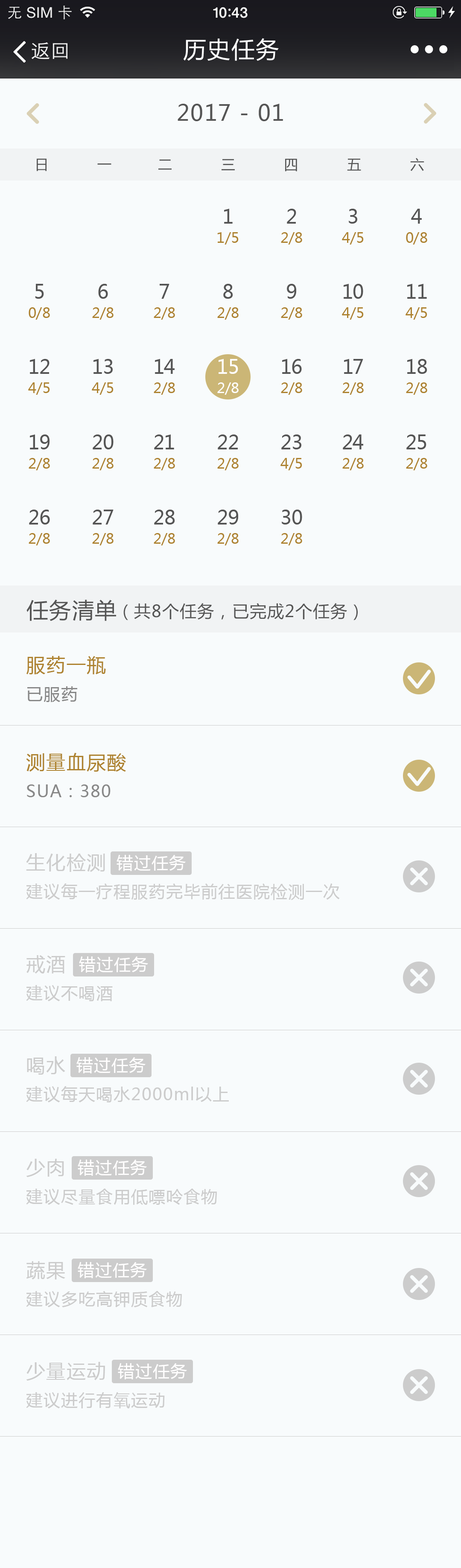
<style>
.page{position:relative;width:461px;height:1568px;background:#f8fbfc}
.page>*{position:absolute;margin:0}
.t1{font:21.8px "MicrosoftYaHei";letter-spacing:0.05em;color:#555555}
.t2{font:14.1px "MicrosoftYaHei";letter-spacing:3.48em;color:#555555}
.t3{font:14.1px/19.2px "MicrosoftYaHei";letter-spacing:0.025em;color:#ae8330}
.t4{font:19.2px/19.2px "MicrosoftYaHei";letter-spacing:0.025em;color:#555555}
.t5{font:14.1px/19.2px "MicrosoftYaHei";letter-spacing:0.025em;color:#fffefe}
.t6{font:19.2px/19.2px "MicrosoftYaHei";letter-spacing:0.025em;color:#fffefe}
.t7{font:16.6px "MicrosoftYaHei";letter-spacing:0.05em;color:#555555}
.t8{font:19.2px/28.2px "MicrosoftYaHei";letter-spacing:0.05em;color:#ae8330}
.t9{font:16.6px/28.2px "MicrosoftYaHei";letter-spacing:0.05em;color:#888888}
.t10{font:16.6px/28.2px "MicrosoftYaHei";letter-spacing:0.05em;color:#cccccc}
.t11{font:19.2px/28.2px "MicrosoftYaHei";letter-spacing:0.05em;color:#cccccc}
.t12{font:16.6px "MicrosoftYaHei";letter-spacing:0.05em;color:#fffefe}
</style>
<div class="page">
<p class="t1" style="left:178px;top:104px;width:105px;height:17px">2017 - 01</p>
<p class="t2" style="left:37px;top:158px;width:387px;height:14px">日一二三四五六</p>
<p class="t3" style="left:217px;top:209px;width:22px;height:36px;text-align:center"><span class="t4">1<br></span>1/5</p>
<p class="t3" style="left:281px;top:209px;width:21px;height:36px;text-align:center"><span class="t4">2<br></span>2/8</p>
<p class="t3" style="left:342px;top:209px;width:22px;height:36px;text-align:center"><span class="t4">3<br></span>4/5</p>
<p class="t3" style="left:406px;top:209px;width:21px;height:36px;text-align:center"><span class="t4">4<br></span>0/8</p>
<p class="t3" style="left:29px;top:284px;width:21px;height:36px;text-align:center"><span class="t4">5<br></span>0/8</p>
<p class="t3" style="left:92px;top:284px;width:22px;height:36px;text-align:center"><span class="t4">6<br></span>2/8</p>
<p class="t3" style="left:154px;top:284px;width:21px;height:36px;text-align:center"><span class="t4">7<br></span>2/8</p>
<p class="t3" style="left:217px;top:284px;width:22px;height:36px;text-align:center"><span class="t4">8<br></span>2/8</p>
<p class="t3" style="left:281px;top:284px;width:21px;height:36px;text-align:center"><span class="t4">9<br></span>2/8</p>
<p class="t3" style="left:342px;top:284px;width:22px;height:36px;text-align:center"><span class="t4">10<br></span>4/5</p>
<p class="t3" style="left:405px;top:284px;width:22px;height:36px;text-align:center"><span class="t4">11<br></span>4/5</p>
<p class="t3" style="left:28px;top:359px;width:22px;height:36px;text-align:center"><span class="t4">12<br></span>4/5</p>
<p class="t3" style="left:92px;top:359px;width:22px;height:36px;text-align:center"><span class="t4">13<br></span>4/5</p>
<p class="t3" style="left:154px;top:359px;width:21px;height:36px;text-align:center"><span class="t4">14<br></span>2/8</p>
<p class="t5" style="left:217px;top:359px;width:22px;height:36px;text-align:center"><span class="t6">15<br></span>2/8</p>
<p class="t3" style="left:281px;top:359px;width:21px;height:36px;text-align:center"><span class="t4">16<br></span>2/8</p>
<p class="t3" style="left:342px;top:359px;width:22px;height:36px;text-align:center"><span class="t4">17<br></span>2/8</p>
<p class="t3" style="left:406px;top:359px;width:21px;height:36px;text-align:center"><span class="t4">18<br></span>2/8</p>
<p class="t3" style="left:29px;top:434px;width:21px;height:36px;text-align:center"><span class="t4">19<br></span>2/8</p>
<p class="t3" style="left:92px;top:434px;width:22px;height:36px;text-align:center"><span class="t4">20<br></span>2/8</p>
<p class="t3" style="left:154px;top:434px;width:21px;height:36px;text-align:center"><span class="t4">21<br></span>2/8</p>
<p class="t3" style="left:217px;top:434px;width:22px;height:36px;text-align:center"><span class="t4">22<br></span>2/8</p>
<p class="t3" style="left:280px;top:434px;width:22px;height:36px;text-align:center"><span class="t4">23<br></span>4/5</p>
<p class="t3" style="left:342px;top:434px;width:22px;height:36px;text-align:center"><span class="t4">24<br></span>2/8</p>
<p class="t3" style="left:406px;top:434px;width:21px;height:36px;text-align:center"><span class="t4">25<br></span>2/8</p>
<p class="t3" style="left:29px;top:510px;width:21px;height:35px;text-align:center"><span class="t4">26<br></span>2/8</p>
<p class="t3" style="left:92px;top:510px;width:22px;height:35px;text-align:center"><span class="t4">27<br></span>2/8</p>
<p class="t3" style="left:154px;top:510px;width:21px;height:35px;text-align:center"><span class="t4">28<br></span>2/8</p>
<p class="t3" style="left:217px;top:510px;width:22px;height:35px;text-align:center"><span class="t4">29<br></span>2/8</p>
<p class="t3" style="left:281px;top:510px;width:21px;height:35px;text-align:center"><span class="t4">30<br></span>2/8</p>
<p class="t1" style="left:26px;top:600px;width:90px;height:21px">任务清单</p>
<p class="t7" style="left:123px;top:603px;width:235px;height:17px">（共8个任务，已完成2个任务）</p>
<p class="t8" style="left:26px;top:656px;width:80px;height:46px;text-align:justify">服药一瓶<br><span class="t9">已服药</span></p>
<p class="t9" style="left:26px;top:753px;width:100px;height:44px;text-align:justify"><span class="t8">测量血尿酸<br></span>SUA：380</p>
<p class="t10" style="left:26px;top:853px;width:314px;height:47px;text-align:justify"><span class="t11">生化检测<br></span>建议每一疗程服药完毕前往医院检测一次</p>
<p class="t12" style="left:117px;top:855px;width:69px;height:16px">错过任务</p>
<p class="t10" style="left:26px;top:955px;width:87px;height:46px;text-align:justify"><span class="t11">戒酒<br></span>建议不喝酒</p>
<p class="t12" style="left:79px;top:956px;width:69px;height:17px">错过任务</p>
<p class="t10" style="left:26px;top:1056px;width:203px;height:46px;text-align:justify"><span class="t11">喝水<br></span>建议每天喝水2000ml以上</p>
<p class="t12" style="left:76px;top:1057px;width:70px;height:16px">错过任务</p>
<p class="t10" style="left:26px;top:1159px;width:191px;height:46px;text-align:justify"><span class="t11">少肉<br></span>建议尽量食用低嘌呤食物</p>
<p class="t12" style="left:78px;top:1160px;width:69px;height:16px">错过任务</p>
<p class="t10" style="left:26px;top:1261px;width:156px;height:46px;text-align:justify"><span class="t11">蔬果<br></span>建议多吃高钾质食物</p>
<p class="t12" style="left:78px;top:1262px;width:69px;height:16px">错过任务</p>
<p class="t10" style="left:26px;top:1362px;width:139px;height:46px;text-align:justify"><span class="t11">少量运动<br></span>建议进行有氧运动</p>
<p class="t12" style="left:118px;top:1363px;width:69px;height:16px">错过任务</p>
</div>
